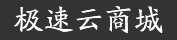
<style>
.page{position:relative;width:177px;height:40px;background:#333333}
.page>*{position:absolute;margin:0}
.t1{font:30px "FZBWKSJW--GB1-0";color:#ffffff}
</style>
<div class="page">
<p class="t1" style="left:14px;top:6px;width:149px;height:28px">极速云商城</p>
</div>
